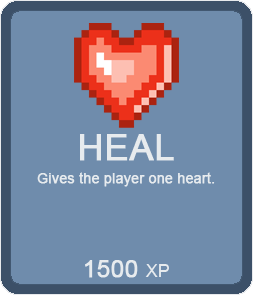
<style>
.page{position:relative;width:253px;height:295px;background:#6f8cac}
.page>*{position:absolute;margin:0}
.t1{font:36px "ArialMT";color:#e7ebee;font-weight:bold}
.t2{font:14px "ArialMT";color:#e7ebee;font-weight:bold}
.t3{font:24px "ArialMT";color:#e7ebee;font-weight:bold}
.t4{font:18px "ArialMT";color:#e7ebee}
</style>
<div class="page">
<p class="t1" style="left:80px;top:134px;width:94px;height:27px">HEAL</p>
<p class="t2" style="left:37px;top:172px;width:178px;height:15px">Gives the player one heart.</p>
<p class="t3" style="left:85px;top:260px;width:84px;height:18px">1500 <span class="t4">XP</span></p>
</div>
